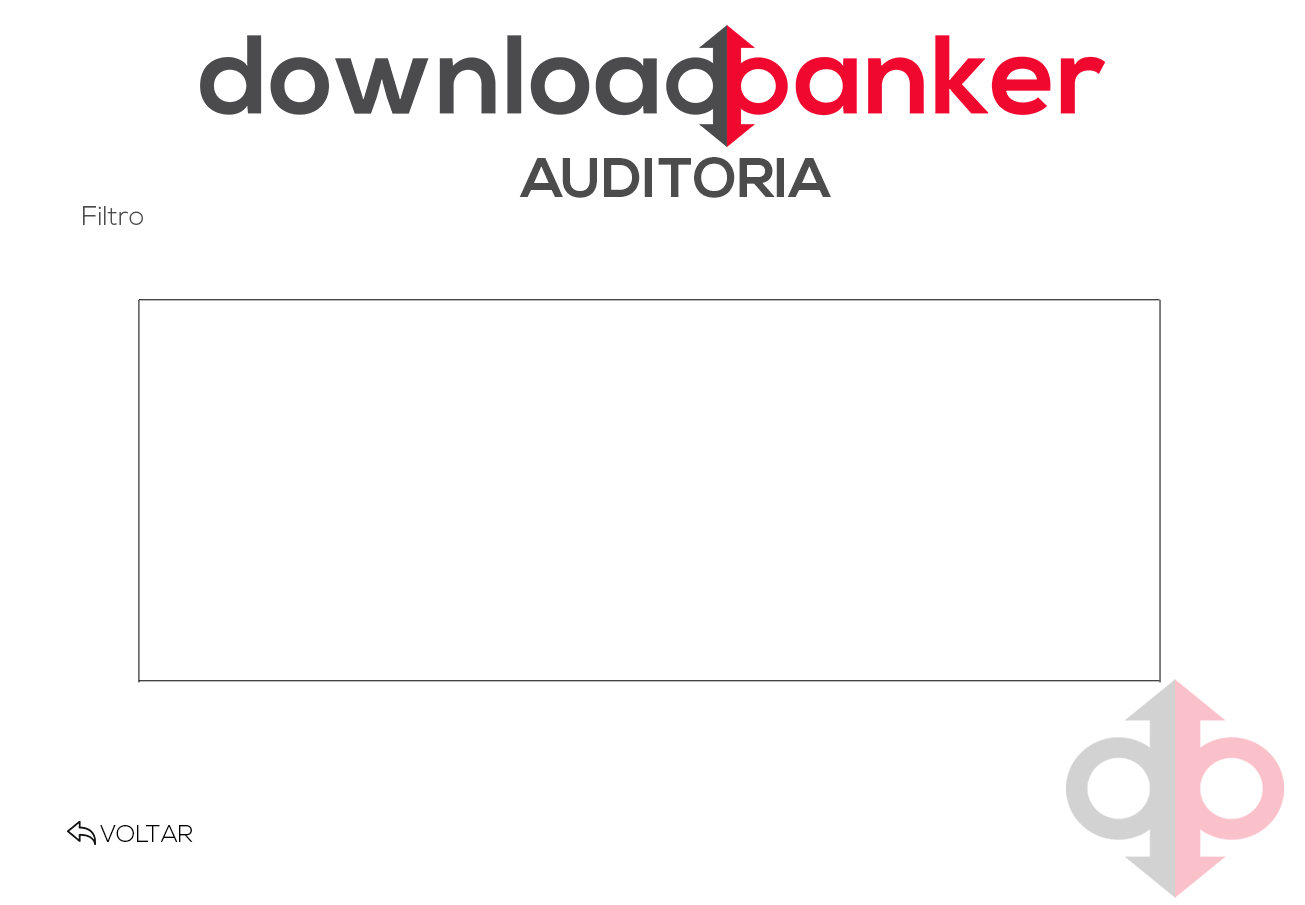
<style>
.page{position:relative;width:1305px;height:905px;background:#ffffff}
.page>*{position:absolute;margin:0}
.t1{font:56.3px "NexaBold";color:#4c4c4c}
.t2{font:27px "NexaLight";color:#4c4c4c}
.t3{font:24px "NexaLight";color:#000000}
</style>
<div class="page">
<p class="t1" style="left:519px;top:157px;width:312px;height:41px">AUDITORIA</p>
<p class="t2" style="left:83px;top:206px;width:60px;height:19px">Filtro</p>
<p class="t3" style="left:100px;top:825px;width:93px;height:17px">VOLTAR</p>
</div>
